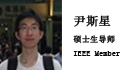
<style>
.page{position:relative;width:140px;height:70px;background:#ffffff}
.page>*{position:absolute;margin:0}
.t1{font:7.9px "SimSun";color:#090909;font-weight:bold}
.t2{font:11.8px "SimSun";color:#090909;font-weight:bold}
</style>
<div class="page">
<p class="t1" style="left:73px;top:15px;width:47px;height:41px"><span class="t2">尹斯星<br></span>硕士生导师<br>IEEE Member</p>
</div>
